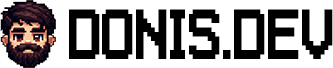
<style>
.page{position:relative;width:333px;height:68px;background:#ffffff}
.page>*{position:absolute;margin:0}
.t1{font:72px "VCRosdNEUE";color:#000000;scale:0.84 1}
</style>
<div class="page">
<p class="t1" style="left:69px;top:9px;width:264px;height:50px">DONIS.DEV</p>
</div>
